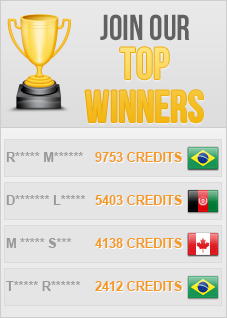
<style>
.page{position:relative;width:227px;height:318px;background:#e5e5e5}
.page>*{position:absolute;margin:0}
.t1{font:36px "BebasNeue";color:#616161;scale:0.96 1}
.t2{font:45px/43px "BebasNeue";scale:0.96 1}
.t3{font:12.7px/27px "Arial-BoldMT";color:#999999}
.t4{font:12.7px/16px "Arial-BoldMT";color:#999999}
.t5{font:12.7px/1px "Arial-BoldMT";color:#999999}
.t6{font:12.7px/27px "Arial-BoldMT";color:#999999;text-transform:uppercase}
.t7{font:12.7px/16px "Arial-BoldMT";color:#f49922}
.t8{font:12.7px/27px "Arial-BoldMT";color:#f49922}
.t9{font:12.7px/1px "Arial-BoldMT";color:#f49922}
</style>
<div class="page">
<p class="t1" style="left:100px;top:14px;width:90px;height:27px">join our</p>
<p class="t2" style="left:85px;top:47px;width:118px;height:76px;text-align:center">TOP <br>winners</p>
<p class="t3" style="left:6px;top:152px;width:80px;height:139px"><span class="t4">R***** M******<br><br></span>D******* L***** <br><br> <br><span class="t5">M ***** S***  <br><br></span><span class="t6">T***** r******</span></p>
<p class="t7" style="left:95px;top:152px;width:87px;height:139px">9753 CREDITS    <br><br><span class="t8">5403 </span>CREDITS<br><br> <br><span class="t9">4138</span> CREDITS<br><br>2412 CREDITS</p>
</div>
